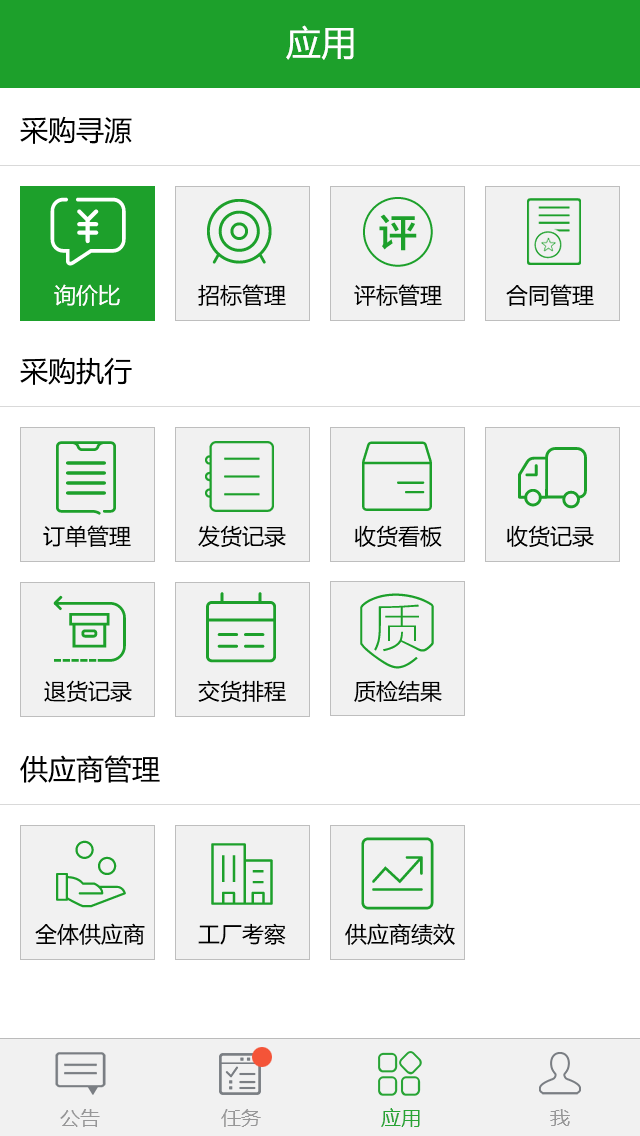
<style>
.page{position:relative;width:640px;height:1136px;background:#ffffff}
.page>*{position:absolute;margin:0}
.t1{font:35px "MicrosoftYaHei";color:#ffffff}
.t2{font:28px "MicrosoftYaHei";color:#000000}
.t3{font:22px "MicrosoftYaHei";color:#ffffff}
.t4{font:22px "MicrosoftYaHei";color:#000000}
.t5{font:20px "MicrosoftYaHei";color:#979798}
.t6{font:20px "MicrosoftYaHei";color:#28a435}
</style>
<div class="page">
<p class="t1" style="left:286px;top:25px;width:68px;height:35px">应用</p>
<p class="t2" style="left:20px;top:116px;width:112px;height:28px">采购寻源</p>
<p class="t3" style="left:54px;top:284px;width:66px;height:22px">询价比</p>
<p class="t4" style="left:198px;top:284px;width:88px;height:22px">招标管理</p>
<p class="t4" style="left:354px;top:284px;width:88px;height:22px">评标管理</p>
<p class="t4" style="left:506px;top:284px;width:88px;height:22px">合同管理</p>
<p class="t2" style="left:20px;top:357px;width:112px;height:28px">采购执行</p>
<p class="t4" style="left:43px;top:525px;width:88px;height:22px">订单管理</p>
<p class="t4" style="left:198px;top:525px;width:88px;height:22px">发货记录</p>
<p class="t4" style="left:354px;top:525px;width:88px;height:22px">收货看板</p>
<p class="t4" style="left:506px;top:525px;width:88px;height:22px">收货记录</p>
<p class="t4" style="left:44px;top:680px;width:88px;height:22px">退货记录</p>
<p class="t4" style="left:198px;top:680px;width:88px;height:22px">交货排程</p>
<p class="t4" style="left:354px;top:680px;width:88px;height:22px">质检结果</p>
<p class="t2" style="left:20px;top:755px;width:140px;height:28px">供应商管理</p>
<p class="t4" style="left:35px;top:923px;width:110px;height:22px">全体供应商</p>
<p class="t4" style="left:198px;top:923px;width:88px;height:22px">工厂考察</p>
<p class="t4" style="left:345px;top:923px;width:110px;height:22px">供应商绩效</p>
<p class="t5" style="left:60px;top:1109px;width:40px;height:18px">公告</p>
<p class="t5" style="left:221px;top:1109px;width:40px;height:18px">任务</p>
<p class="t6" style="left:381px;top:1108px;width:39px;height:19px">应用</p>
<p class="t5" style="left:550px;top:1109px;width:20px;height:17px">我</p>
</div>
